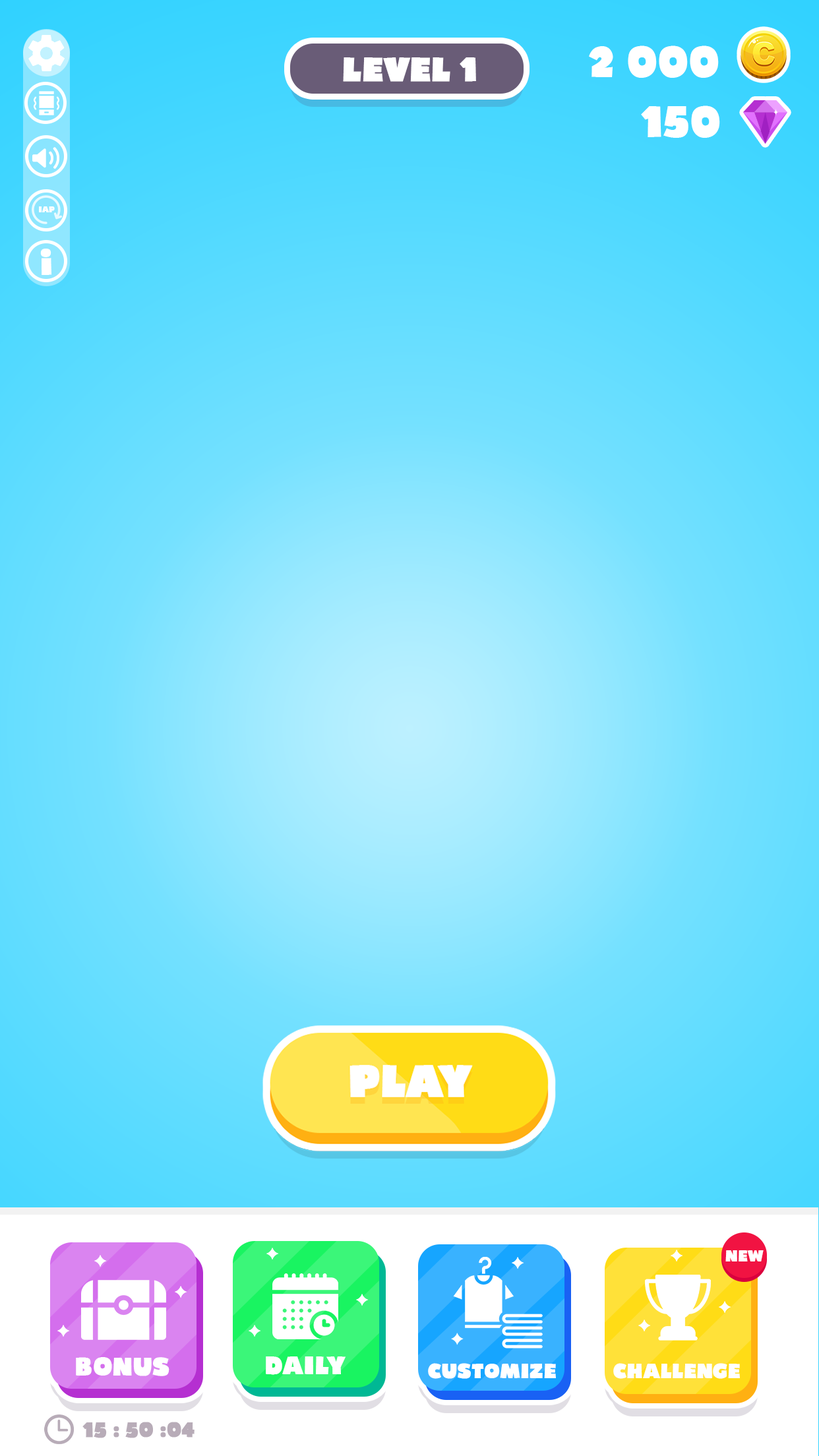
<style>
.page{position:relative;width:819px;height:1456px}
.page>*{position:absolute;margin:0}
.t1{font:42.2px "Bumpo";color:#ffffff}
.t2{font:32.2px "Bumpo";color:#ffffff;font-weight:bold}
.t3{font:7.9px "Bumpo";color:#ffffff}
.t4{font:32.4px "Bumpo";color:#ffffff}
.t5{font:15px "Bumpo";color:#ffffff}
.t6{font:24.3px "Bumpo";color:#ffffff}
.t7{font:19.8px "Bumpo";color:#ffffff}
.t8{font:19.8px "Bumpo";color:#b8acb8;font-weight:bold}
</style>
<div class="page">
<p class="t1" style="left:589px;top:45px;width:130px;height:33px">2 000</p>
<p class="t2" style="left:343px;top:57px;width:133px;height:25px">LEVEL 1</p>
<p class="t1" style="left:641px;top:106px;width:79px;height:32px">150</p>
<p class="t3" style="left:39px;top:206px;width:16px;height:6px">IAP</p>
<p class="t4" style="left:40px;top:249px;width:12px;height:26px">i</p>
<p class="t5" style="left:725px;top:1250px;width:39px;height:11px">NEW</p>
<p class="t6" style="left:76px;top:1357px;width:93px;height:19px">BONUS</p>
<p class="t6" style="left:266px;top:1356px;width:80px;height:19px">DAILY</p>
<p class="t7" style="left:428px;top:1363px;width:128px;height:16px">CUSTOMIZE</p>
<p class="t7" style="left:613px;top:1363px;width:127px;height:16px">CHALLENGE</p>
<p class="t8" style="left:82px;top:1422px;width:113px;height:16px">15 : 50 :04</p>
</div>
